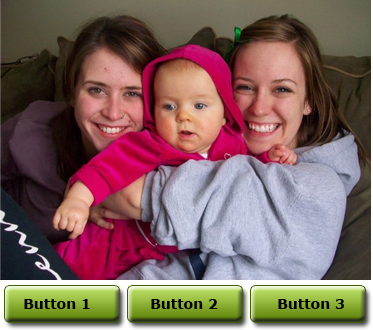
<style>
.page{position:relative;width:373px;height:330px}
.page>*{position:absolute;margin:0}
.t1{font:14px "Verdana-Bold";color:#000000}
</style>
<div class="page">
<p class="t1" style="left:24px;top:299px;width:66px;height:10px">Button 1</p>
<p class="t1" style="left:151px;top:299px;width:67px;height:10px">Button 2</p>
<p class="t1" style="left:278px;top:299px;width:66px;height:10px">Button 3</p>
</div>
